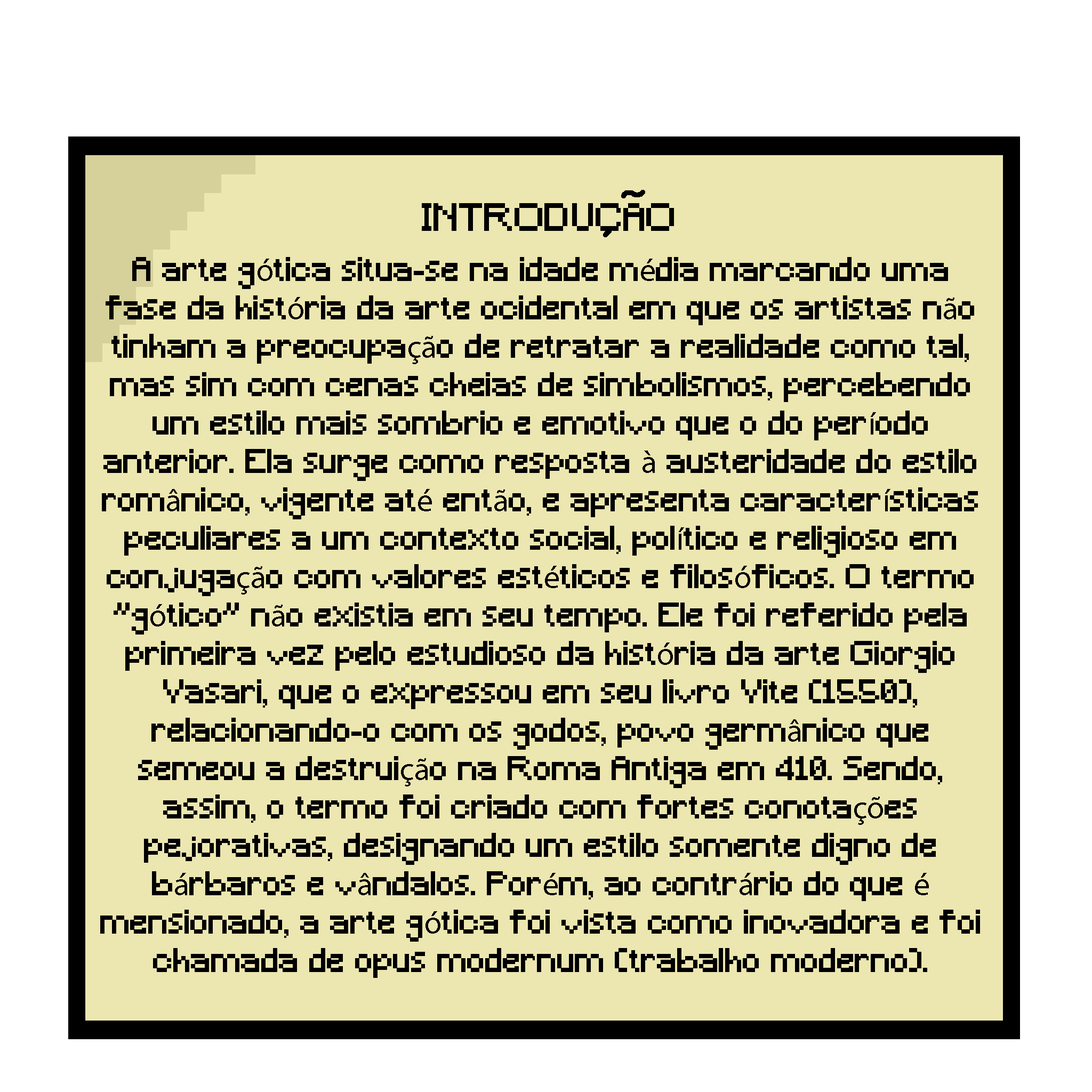
<style>
.page{position:relative;width:1092px;height:1092px;background:#ece6b0}
.page>*{position:absolute;margin:0}
.t1{font:37px "Minecraft";color:#000000}
.t2{font:32px "Minecraft";color:#000000}
.t3{font:32px "MyriadPro-Regular";color:#000000}
</style>
<div class="page">
<p class="t1" style="left:422px;top:203px;width:252px;height:28px">INTRODUCAO</p>
<p class="t2" style="left:100px;top:257px;width:880px;height:721px;text-align:center">A arte g<span class="t3">ó</span>tica situa-se na idade m<span class="t3">é</span>dia marcando uma fase da hist<span class="t3">ó</span>ria da arte ocidental em que os artistas n<span class="t3">ã</span>o tinham a preocupa<span class="t3">çã</span>o de retratar a realidade como tal, mas sim com cenas cheias de simbolismos, percebendo um estilo mais sombrio e emotivo que o do per<span class="t3">í</span>odo anterior. Ela surge como resposta <span class="t3">à</span> austeridade do estilo rom<span class="t3">â</span>nico, vigente at<span class="t3">é</span> ent<span class="t3">ã</span>o, e apresenta caracter<span class="t3">í</span>sticas peculiares a um contexto social, pol<span class="t3">í</span>tico e religioso em conjuga<span class="t3">çã</span>o com valores est<span class="t3">é</span>ticos e filos<span class="t3">ó</span>ficos. O termo "g<span class="t3">ó</span>tico" n<span class="t3">ã</span>o existia em seu tempo. Ele foi referido pela primeira vez pelo estudioso da hist<span class="t3">ó</span>ria da arte Giorgio Vasari, que o expressou em seu livro Vite (1550), relacionando-o com os godos, povo germ<span class="t3">â</span>nico que semeou a destrui<span class="t3">çã</span>o na Roma Antiga em 410. Sendo, assim, o termo foi criado com fortes conota<span class="t3">çõ</span>es pejorativas, designando um estilo somente digno de b<span class="t3">á</span>rbaros e v<span class="t3">â</span>ndalos. Por<span class="t3">é</span>m, ao contr<span class="t3">á</span>rio do que <span class="t3">é</span> mensionado, a arte g<span class="t3">ó</span>tica foi vista como inovadora e foi chamada de opus modernum (trabalho moderno).</p>
</div>
